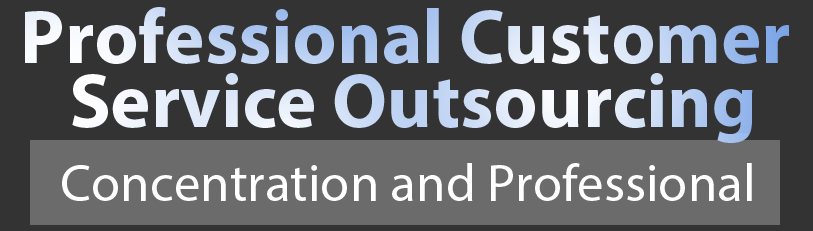
<style>
.page{position:relative;width:813px;height:231px;background:#333333}
.page>*{position:absolute;margin:0}
.t1{font:77px/63.3px "MyriadPro-Bold"}
.t2{font:53.2px "MyriadPro-Regular";color:#ffffff}
</style>
<div class="page">
<p class="t1" style="left:25px;top:7px;width:764px;height:136px;text-align:center">Professional Customer <br>Service Outsourcing</p>
<p class="t2" style="left:62px;top:163px;width:690px;height:38px">Concentration and Professional</p>
</div>
